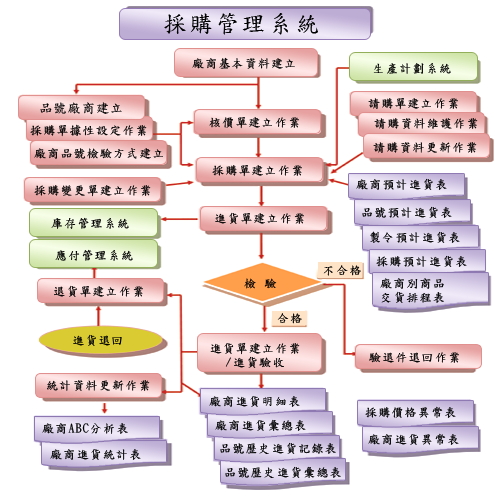
<style>
.page{position:relative;width:495px;height:500px;background:#ffffff}
.page>*{position:absolute;margin:0}
.t1{font:24px "DFKaiShu-SB-Estd-BF";letter-spacing:0.1em;color:#000000}
.t2{font:12px "DFKaiShu-SB-Estd-BF";letter-spacing:0.1em;color:#000000}
.t3{font:13px "DFKaiShu-SB-Estd-BF";letter-spacing:0.1em;color:#000000}
.t4{font:12px "DFKaiShu-SB-Estd-BF";letter-spacing:0.1em}
.t5{font:12px/14px "DFKaiShu-SB-Estd-BF";letter-spacing:0.1em;color:#000000}
</style>
<div class="page">
<p class="t1" style="left:164px;top:13px;width:154px;height:22px">採購管理系統</p>
<p class="t2" style="left:192px;top:57px;width:103px;height:12px">廠商基本資料建立</p>
<p class="t2" style="left:373px;top:63px;width:78px;height:11px">生產計劃系統</p>
<p class="t3" style="left:40px;top:102px;width:82px;height:13px">品號廠商建立</p>
<p class="t2" style="left:368px;top:98px;width:90px;height:12px">請購單建立作業</p>
<p class="t2" style="left:30px;top:124px;width:117px;height:13px">採購單據性設定作業</p>
<p class="t2" style="left:209px;top:117px;width:90px;height:12px">核價單建立作業</p>
<p class="t2" style="left:374px;top:118px;width:104px;height:11px">請購資料維護作業</p>
<p class="t2" style="left:34px;top:148px;width:129px;height:11px">廠商品號檢驗方式建立</p>
<p class="t2" style="left:373px;top:142px;width:104px;height:11px">請購資料更新作業</p>
<p class="t2" style="left:212px;top:165px;width:90px;height:12px">採購單建立作業</p>
<p class="t2" style="left:34px;top:184px;width:117px;height:13px">採購變更單建立作業</p>
<p class="t2" style="left:356px;top:178px;width:91px;height:12px">廠商預計進貨表</p>
<p class="t2" style="left:362px;top:206px;width:90px;height:12px">品號預計進貨表</p>
<p class="t2" style="left:51px;top:217px;width:78px;height:12px">庫存管理系統</p>
<p class="t2" style="left:215px;top:212px;width:89px;height:13px">進貨單建立作業</p>
<p class="t2" style="left:370px;top:231px;width:90px;height:12px">製令預計進貨表</p>
<p class="t2" style="left:55px;top:249px;width:78px;height:12px">應付管理系統</p>
<p class="t2" style="left:376px;top:255px;width:91px;height:12px">採購預計進貨表</p>
<p class="t2" style="left:323px;top:265px;width:38px;height:11px">不合格</p>
<p class="t4" style="left:244px;top:278px;width:33px;height:11px">檢 驗</p>
<p class="t5" style="left:380px;top:278px;width:64px;height:25px">廠商別商品<br>交貨排程表</p>
<p class="t2" style="left:54px;top:285px;width:89px;height:13px">退貨單建立作業</p>
<p class="t2" style="left:277px;top:313px;width:25px;height:11px">合格</p>
<p class="t2" style="left:73px;top:334px;width:49px;height:12px">進貨退回</p>
<p class="t5" style="left:210px;top:342px;width:90px;height:26px;text-align:center">進貨單建立作業<br>/進貨驗收</p>
<p class="t2" style="left:369px;top:352px;width:90px;height:11px">驗退件退回作業</p>
<p class="t2" style="left:47px;top:380px;width:103px;height:11px">統計資料更新作業</p>
<p class="t2" style="left:209px;top:396px;width:91px;height:11px">廠商進貨明細表</p>
<p class="t2" style="left:365px;top:406px;width:91px;height:12px">採購價格異常表</p>
<p class="t2" style="left:42px;top:423px;width:86px;height:11px">廠商ABC分析表</p>
<p class="t2" style="left:215px;top:419px;width:91px;height:12px">廠商進貨彙總表</p>
<p class="t2" style="left:368px;top:433px;width:91px;height:12px">廠商進貨異常表</p>
<p class="t2" style="left:50px;top:449px;width:91px;height:11px">廠商進貨統計表</p>
<p class="t2" style="left:220px;top:442px;width:116px;height:12px">品號歷史進貨記錄表</p>
<p class="t2" style="left:225px;top:466px;width:116px;height:12px">品號歷史進貨彙總表</p>
</div>
